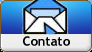
<style>
.page{position:relative;width:92px;height:52px}
.page>*{position:absolute;margin:0}
.t1{font:13px "TrebuchetMS-Bold";color:#000000}
</style>
<div class="page">
<p class="t1" style="left:23px;top:36px;width:47px;height:10px">Contato</p>
</div>
